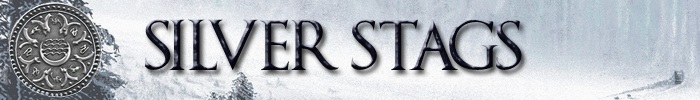
<style>
.page{position:relative;width:700px;height:100px}
.page>*{position:absolute;margin:0}
.t1{font:50px "GameofThrones"}
</style>
<div class="page">
<p class="t1" style="left:145px;top:19px;width:377px;height:51px">SILVER STAGS</p>
</div>
